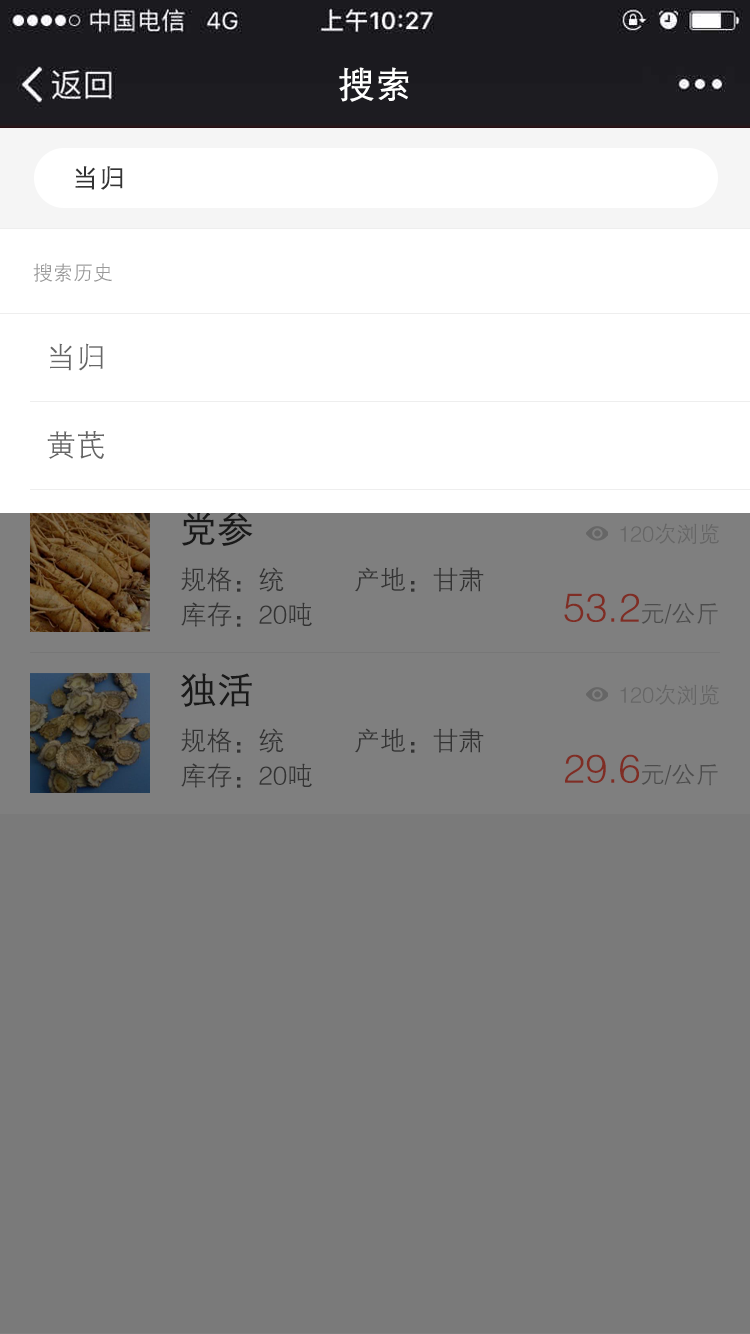
<style>
.page{position:relative;width:750px;height:1334px;background:#7a7a7a}
.page>*{position:absolute;margin:0}
.t1{font:36px "FZZDXJW--GB1-0";color:#ffffff;font-weight:bold}
.t2{font:26px "FZZDXJW--GB1-0";color:#333333;font-weight:bold}
.t3{font:20px "FZZDXJW--GB1-0";color:#999999}
.t4{font:30px "FZZDXJW--GB1-0";color:#666666}
.t5{font:36px "FZZDXJW--GB1-0";color:#191919;font-weight:bold}
.t6{font:22px "FZZDXJW--GB1-0";color:#666666}
.t7{font:26px "FZZDXJW--GB1-0";color:#333333}
.t8{font:40px "FZZDXJW--GB1-0";color:#7f2d24}
.t9{font:24px "FZZDXJW--GB1-0";color:#7f2d24}
</style>
<div class="page">
<p class="t1" style="left:339px;top:67px;width:70px;height:35px">搜索</p>
<p class="t2" style="left:75px;top:166px;width:48px;height:24px">当归</p>
<p class="t3" style="left:33px;top:263px;width:79px;height:19px">搜索历史</p>
<p class="t4" style="left:50px;top:343px;width:53px;height:28px">当归</p>
<p class="t4" style="left:47px;top:431px;width:57px;height:28px">黄芪</p>
<p class="t5" style="left:182px;top:511px;width:71px;height:35px">党参</p>
<p class="t6" style="left:620px;top:523px;width:99px;height:22px">120次浏览</p>
<p class="t7" style="left:181px;top:567px;width:103px;height:25px">规格：统</p>
<p class="t7" style="left:355px;top:567px;width:129px;height:25px">产地：甘肃</p>
<p class="t8" style="left:564px;top:593px;width:154px;height:32px">53.2<span class="t9">元/公斤</span></p>
<p class="t7" style="left:181px;top:602px;width:131px;height:25px">库存：20吨</p>
<p class="t5" style="left:181px;top:673px;width:71px;height:34px">独活</p>
<p class="t6" style="left:620px;top:684px;width:99px;height:22px">120次浏览</p>
<p class="t7" style="left:181px;top:728px;width:103px;height:25px">规格：统</p>
<p class="t7" style="left:355px;top:728px;width:129px;height:25px">产地：甘肃</p>
<p class="t8" style="left:565px;top:754px;width:153px;height:32px">29.6<span class="t9">元/公斤</span></p>
<p class="t7" style="left:181px;top:763px;width:131px;height:25px">库存：20吨</p>
</div>
